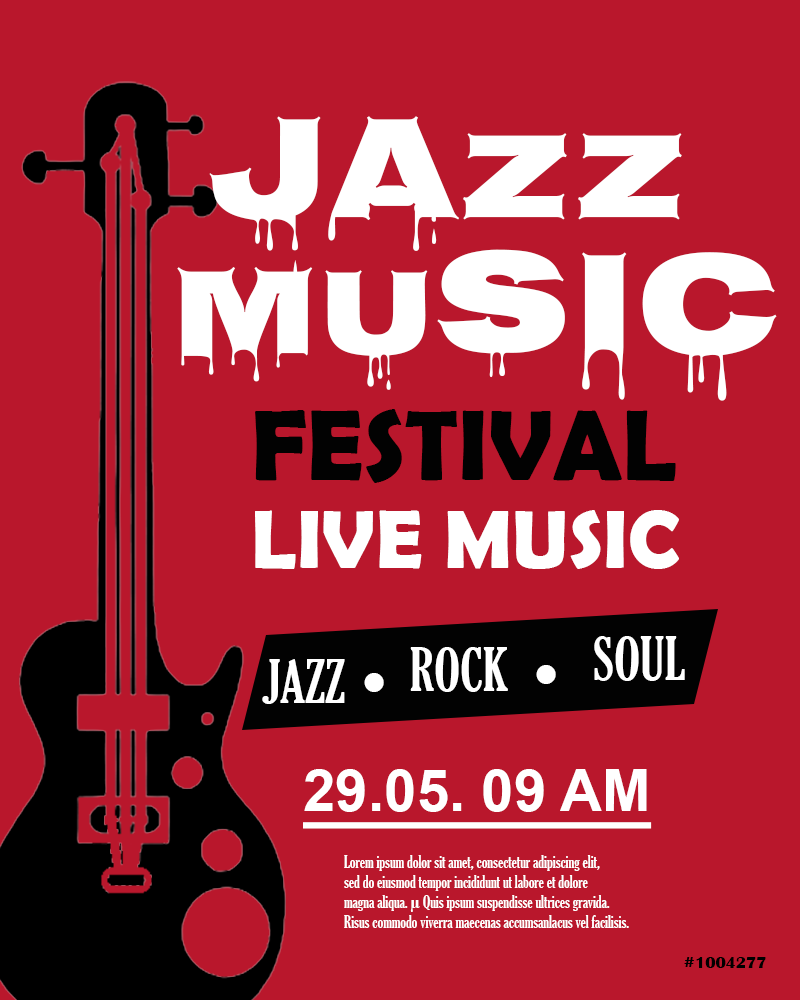
<style>
.page{position:relative;width:800px;height:1000px;background:#b9172c}
.page>*{position:absolute;margin:0}
.t1{font:150px "Nosifer-Regular";color:#ffffff}
.t2{font:125px "Nosifer-Regular";color:#ffffff}
.t3{font:100px "BerlinSansFBDemi-Bold";color:#020202}
.t4{font:83.3px "BerlinSansFBDemi-Bold";color:#ffffff}
.t5{font:58.3px "GloucesterMT-ExtraCondensed";color:#ffffff}
.t6{font:100px "Stencil";color:#ffffff}
.t7{font:58.3px "Arial-BoldMT";color:#ffffff;text-decoration:underline}
.t8{font:16.7px "GloucesterMT-ExtraCondensed";color:#ffffff}
.t9{font:16.7px "BritannicBold";color:#000000}
</style>
<div class="page">
<p class="t1" style="left:209px;top:116px;width:473px;height:161px">JA<span class="t2">ZZ</span></p>
<p class="t1" style="left:177px;top:249px;width:600px;height:152px"><span class="t2">MU</span>SIC</p>
<p class="t3" style="left:255px;top:409px;width:421px;height:74px">FESTIVAL</p>
<p class="t4" style="left:255px;top:510px;width:424px;height:59px">LIVE MUSIC</p>
<p class="t5" style="left:594px;top:636px;width:91px;height:45px">SOUL</p>
<p class="t5" style="left:410px;top:647px;width:98px;height:45px">ROCK</p>
<p class="t5" style="left:262px;top:659px;width:83px;height:45px">JAZZ</p>
<p class="t6" style="left:536px;top:665px;width:20px;height:19px">.</p>
<p class="t6" style="left:364px;top:673px;width:20px;height:19px">.</p>
<p class="t7" style="left:303px;top:769px;width:349px;height:60px">29.05. 09 AM</p>
<p class="t8" style="left:344px;top:855px;width:285px;height:73px">Lorem ipsum dolor sit amet, consectetur adipiscing elit, <br>sed do eiusmod tempor incididunt ut labore et dolore <br>magna aliqua. µ Quis ipsum suspendisse ultrices gravida. <br>Risus commodo viverra maecenas accumsanlacus vel facilisis.</p>
<p class="t9" style="left:684px;top:957px;width:82px;height:11px">#1004277</p>
</div>
